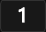
<style>
.page{position:relative;width:46px;height:32px;background:#181818}
.page>*{position:absolute;margin:0}
.t1{font:18.7px "MicrosoftYaHeiUI";color:#fffefe;font-weight:bold}
</style>
<div class="page">
<p class="t1" style="left:18px;top:7px;width:7px;height:16px">1</p>
</div>
